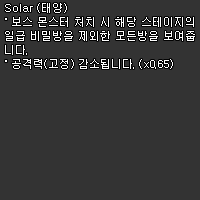
<style>
.page{position:relative;width:200px;height:200px;background:#333333}
.page>*{position:absolute;margin:0}
.t1{font:11px/14px "Dotum";color:#ffffff}
</style>
<div class="page">
<p class="t1" style="left:5px;top:3px;width:190px;height:66px">Solar (태양)<br>˚ 보스 몬스터 처치 시 해당 스테이지의<br>일급 비밀방을 제외한 모든방을 보여줍<br>니다.<br>˚ 공격력(고정) 감소됩니다. (x0.65)</p>
</div>
